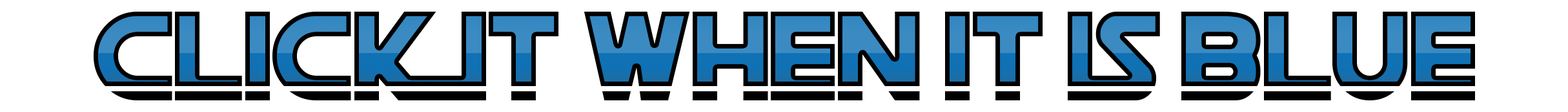
<style>
.page{position:relative;width:1568px;height:112px;background:#ffffff}
.page>*{position:absolute;margin:0}
.t1{font:124.8px "DeathStar"}
</style>
<div class="page">
<p class="t1" style="left:94px;top:12px;width:1381px;height:88px">CLICK IT WHEN IT IS BLUE</p>
</div>
